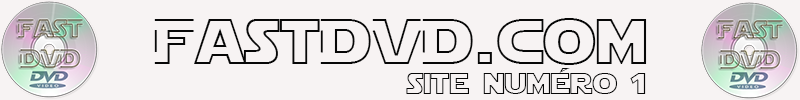
<style>
.page{position:relative;width:800px;height:100px;background:#f7f3f3}
.page>*{position:absolute;margin:0}
.t1{font:64px "StarJediHollow";color:#070707}
.t2{font:30px "StarJediHollow";color:#070707}
</style>
<div class="page">
<p class="t1" style="left:154px;top:18px;width:493px;height:47px">FastDVD.com</p>
<p class="t2" style="left:406px;top:68px;width:240px;height:26px">site numéro 1</p>
</div>
